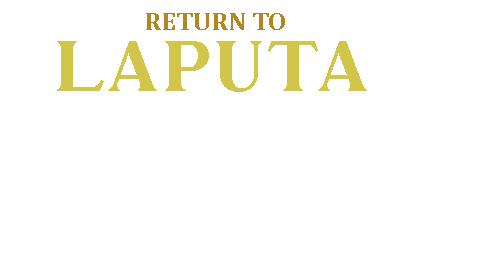
<style>
.page{position:relative;width:480px;height:270px;background:#ffffff}
.page>*{position:absolute;margin:0}
.t1{font:26px "Cambria-Bold";color:#b38523}
.t2{font:72px "Mullion";color:#d1c64a}
</style>
<div class="page">
<p class="t1" style="left:146px;top:13px;width:139px;height:17px">RETURN TO</p>
<p class="t2" style="left:57px;top:41px;width:310px;height:51px">LAPUTA</p>
</div>
